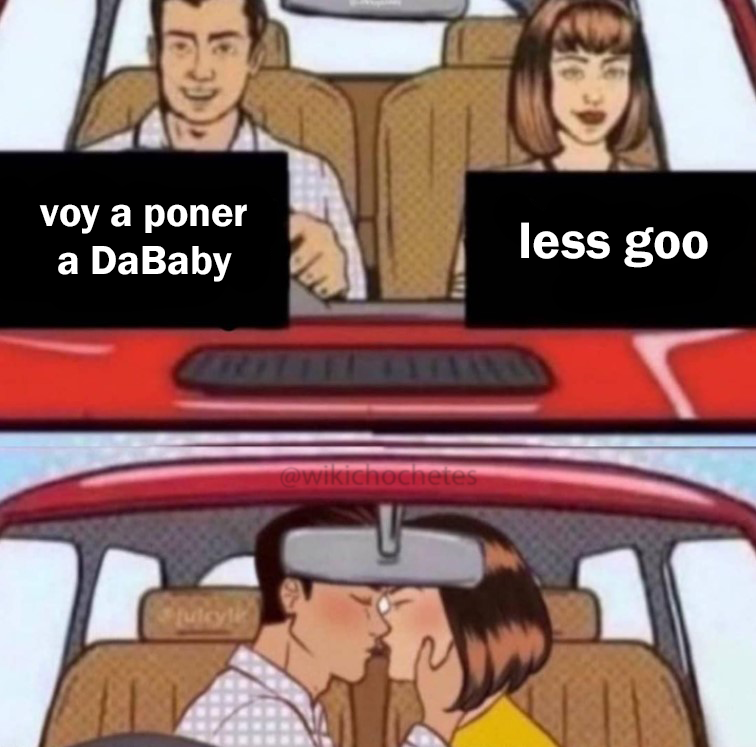
<style>
.page{position:relative;width:756px;height:747px}
.page>*{position:absolute;margin:0}
.t1{font:41.9px "FranklinGothic-Demi";color:#ffffff}
.t2{font:52.8px "FranklinGothic-Demi";color:#ffffff}
</style>
<div class="page">
<p class="t1" style="left:39px;top:204px;width:208px;height:78px;text-align:center">voy a poner<br>a DaBaby</p>
<p class="t2" style="left:521px;top:222px;width:187px;height:46px">less goo</p>
</div>
